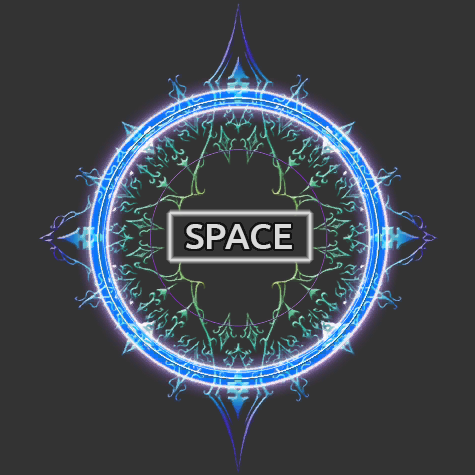
<style>
.page{position:relative;width:475px;height:475px;background:#333333}
.page>*{position:absolute;margin:0}
.t1{font:36px "Ubuntu-Medium";color:#dadada}
</style>
<div class="page">
<p class="t1" style="left:186px;top:224px;width:106px;height:25px">SPACE</p>
</div>
